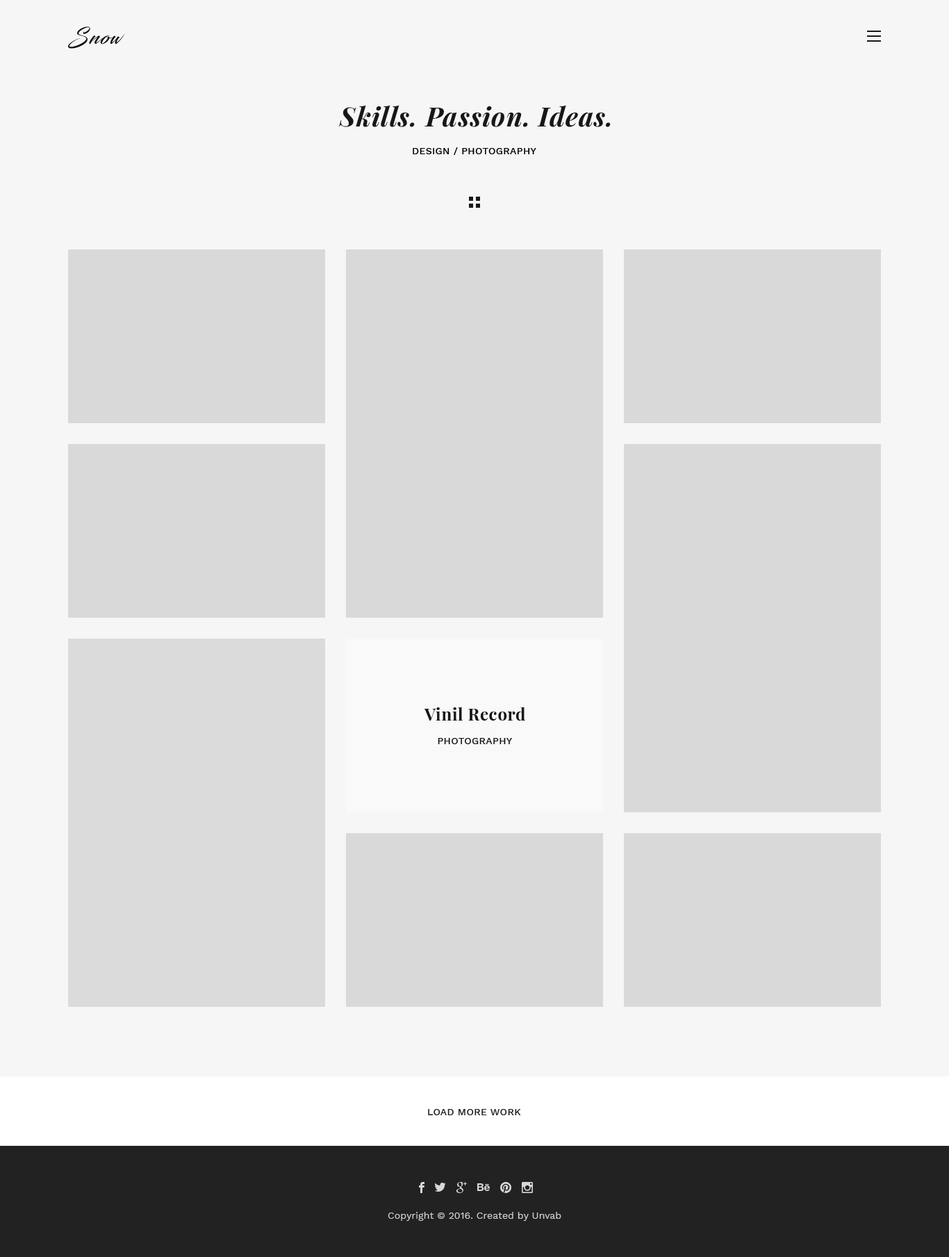
<style>
.page{position:relative;width:949px;height:1257px;background:#f6f6f6}
.page>*{position:absolute;margin:0}
.t1{font:26.4px "PlayfairDisplay-BoldItalic";letter-spacing:0.03em;color:#171717}
.t2{font:9.7px "WorkSans-Medium";letter-spacing:0.025em;color:#000000;text-transform:uppercase}
.t3{font:16.7px "PlayfairDisplay-Bold";letter-spacing:0.03em;color:#171717}
.t4{font:9.7px "WorkSans-Medium";letter-spacing:0.025em;color:#171717;text-transform:uppercase}
.t5{font:9.7px "WorkSans-Medium";letter-spacing:0.025em;color:#1d1d1d;text-transform:uppercase}
.t6{font:9.7px "WorkSans-Regular";letter-spacing:0.005em;color:#d3d3d3}
</style>
<div class="page">
<p class="t1" style="left:338px;top:105px;width:273px;height:22px">Skills. Passion. Ideas.</p>
<p class="t2" style="left:413px;top:147px;width:123px;height:8px">Design / Photography</p>
<p class="t3" style="left:424px;top:706px;width:101px;height:14px">Vinil Record</p>
<p class="t4" style="left:438px;top:738px;width:74px;height:6px">photography</p>
<p class="t5" style="left:428px;top:1109px;width:93px;height:6px">load more work</p>
<p class="t6" style="left:388px;top:1211px;width:173px;height:10px">Copyright © 2016. Created by Unvab</p>
</div>
